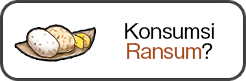
<style>
.page{position:relative;width:246px;height:81px;background:#ffffff}
.page>*{position:absolute;margin:0}
.t1{font:20px/20px "GothicMB101Pro-Regular";letter-spacing:-0.04em;color:#000000}
.t2{font:20px/20px "GothicMB101Pro-Regular";letter-spacing:-0.04em;color:#a84910}
</style>
<div class="page">
<p class="t1" style="left:125px;top:23px;width:89px;height:36px;text-align:center">Konsumsi<br><span class="t2">Ransum</span>?</p>
</div>
